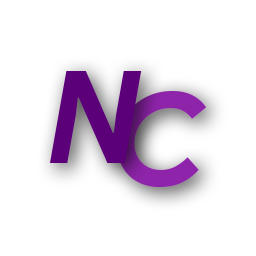
<style>
.page{position:relative;width:256px;height:256px;background:#ffffff}
.page>*{position:absolute;margin:0}
.t1{font:129.4px "ProductSans-BoldItalic";letter-spacing:-0.22em;color:#5c007a}
.t2{font:129.4px "ProductSans-BoldItalic";letter-spacing:-0.22em;color:#8e24aa}
</style>
<div class="page">
<p class="t1" style="left:50px;top:71px;width:92px;height:92px">N</p>
<p class="t2" style="left:116px;top:91px;width:91px;height:96px">C</p>
</div>
